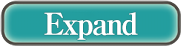
<style>
.page{position:relative;width:181px;height:46px}
.page>*{position:absolute;margin:0}
.t1{font:30px "RyuminPro-ExBold";letter-spacing:-0.08em;color:#ffffff}
</style>
<div class="page">
<p class="t1" style="left:44px;top:12px;width:94px;height:28px">Expand</p>
</div>
